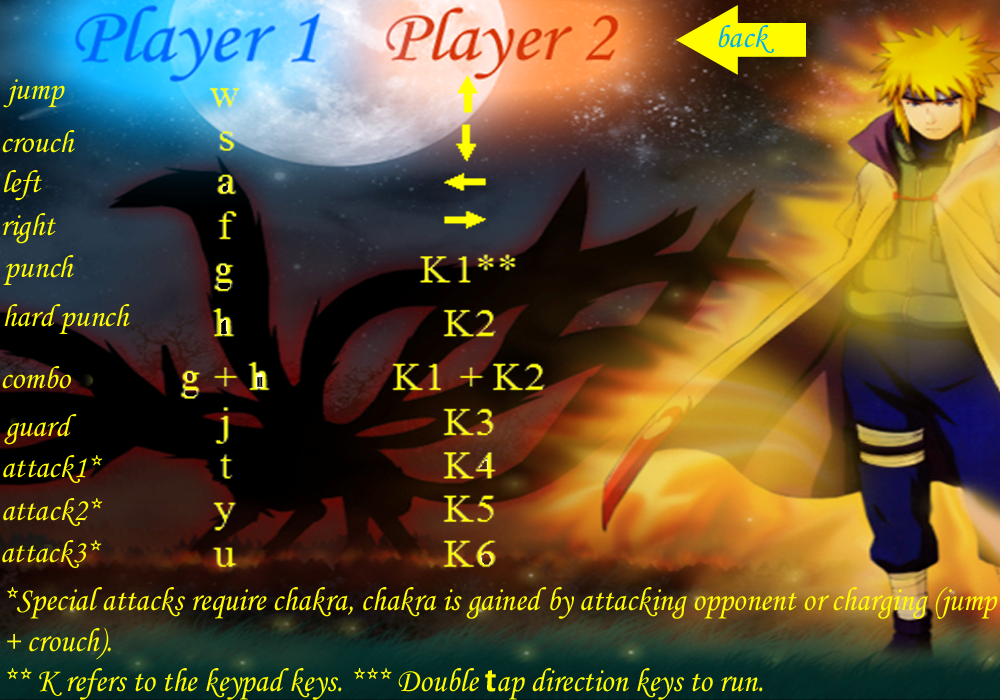
<style>
.page{position:relative;width:1000px;height:700px}
.page>*{position:absolute;margin:0}
.t1{font:32px "MonotypeCorsiva";color:#00aeef}
.t2{font:32px "MonotypeCorsiva";color:#fffc00}
.t3{font:33.4px "MonotypeCorsiva";color:#fffc00;scale:0.94 1}
.t4{font:33.4px "ErasITC-Demi";color:#fffc00;scale:0.94 1}
</style>
<div class="page">
<p class="t1" style="left:718px;top:25px;width:56px;height:28px">back</p>
<p class="t2" style="left:3px;top:79px;width:62px;height:29px">jump</p>
<p class="t2" style="left:2px;top:130px;width:73px;height:23px">crouch</p>
<p class="t2" style="left:4px;top:170px;width:38px;height:31px">left</p>
<p class="t2" style="left:2px;top:213px;width:54px;height:31px">right</p>
<p class="t2" style="left:3px;top:255px;width:71px;height:30px">punch</p>
<p class="t2" style="left:4px;top:304px;width:126px;height:30px">hard punch</p>
<p class="t2" style="left:2px;top:366px;width:69px;height:23px">combo</p>
<p class="t2" style="left:4px;top:414px;width:73px;height:31px">guard</p>
<p class="t2" style="left:3px;top:455px;width:100px;height:28px">attack1*</p>
<p class="t2" style="left:3px;top:498px;width:100px;height:28px">attack2*</p>
<p class="t2" style="left:2px;top:540px;width:100px;height:28px">attack3*</p>
<p class="t3" style="left:7px;top:587px;width:991px;height:113px">*Special attacks require chakra, chakra is gained by attacking opponent or charging (jump + crouch).<br>** K refers to the keypad keys. *** Double <span class="t4">t</span>ap direction keys to run.<br><br>**</p>
</div>
